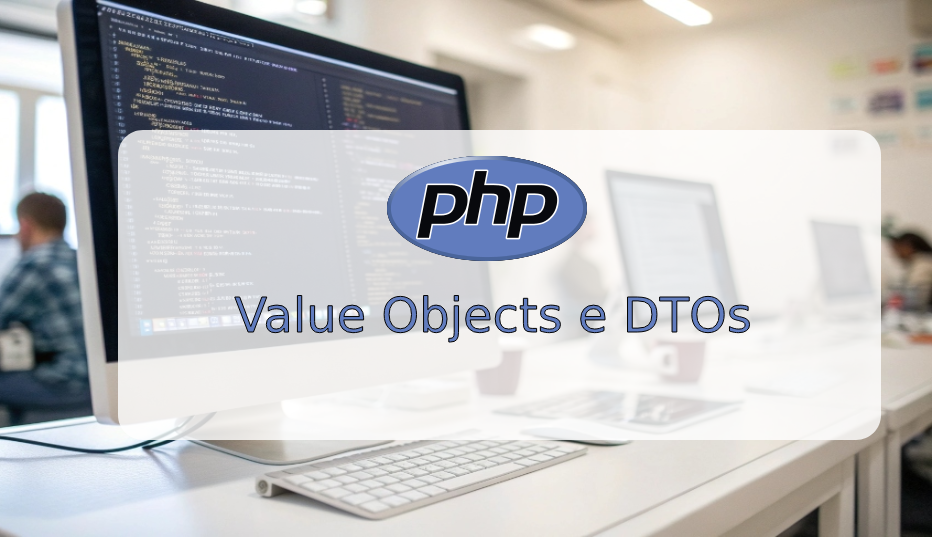
<style>
.page{position:relative;width:932px;height:537px}
.page>*{position:absolute;margin:0}
.t1{font:48px "DejaVuSans"}
.t2{font:39px "DejaVuSans"}
</style>
<div class="page">
<p class="t1" style="left:233px;top:294px;width:518px;height:49px"><span class="t2">       </span>Value Objects e DTOs</p>
</div>
